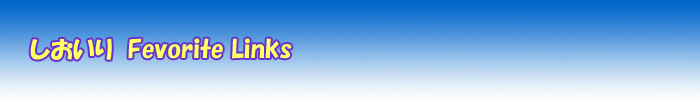
<style>
.page{position:relative;width:700px;height:100px}
.page>*{position:absolute;margin:0}
.t1{font:24px "HGPSoeiKakupoptai";color:#ffff66}
</style>
<div class="page">
<p class="t1" style="left:30px;top:38px;width:262px;height:22px">しおいり  Fevorite Links</p>
</div>
